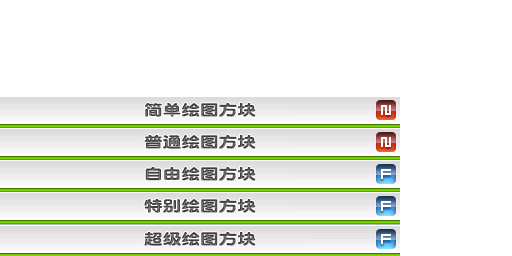
<style>
.page{position:relative;width:512px;height:256px;background:#ffffff}
.page>*{position:absolute;margin:0}
.t1{font:14.9px "DFPYuanW9";scale:1.25 1}
</style>
<div class="page">
<p class="t1" style="left:145px;top:102px;width:111px;height:15px">简单绘图方块</p>
<p class="t1" style="left:144px;top:134px;width:112px;height:15px">普通绘图方块</p>
<p class="t1" style="left:145px;top:166px;width:111px;height:15px">自由绘图方块</p>
<p class="t1" style="left:144px;top:198px;width:112px;height:15px">特别绘图方块</p>
<p class="t1" style="left:144px;top:231px;width:112px;height:15px">超级绘图方块</p>
</div>
